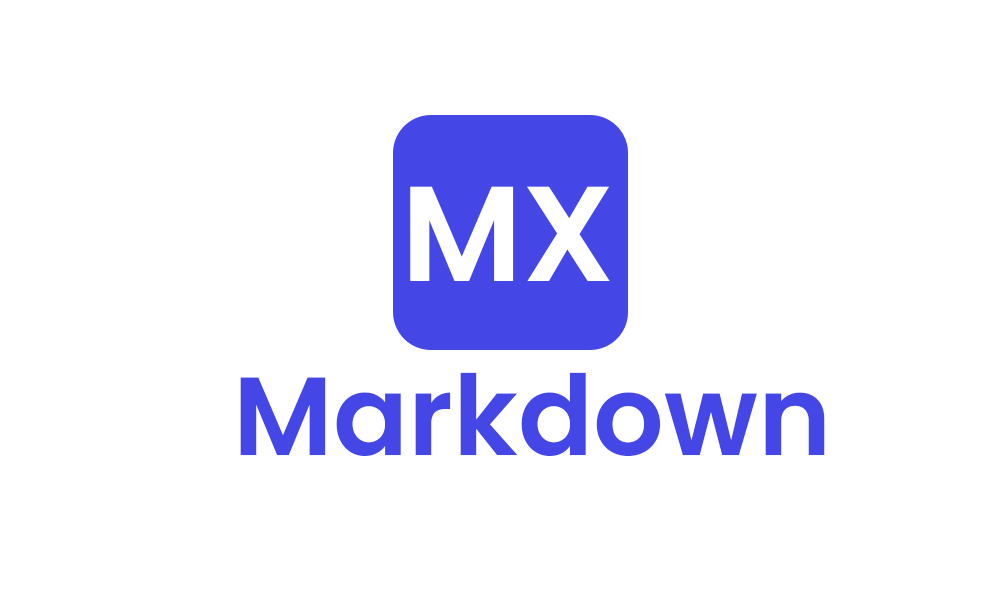
<style>
.page{position:relative;width:1000px;height:600px;background:#ffffff}
.page>*{position:absolute;margin:0}
.t1{font:135px "Poppins-SemiBold";color:#ffffff}
.t2{font:111px "Poppins-SemiBold";color:#4447e6}
</style>
<div class="page">
<p class="t1" style="left:410px;top:186px;width:200px;height:95px">MX</p>
<p class="t2" style="left:240px;top:372px;width:585px;height:84px">Markdown</p>
</div>
